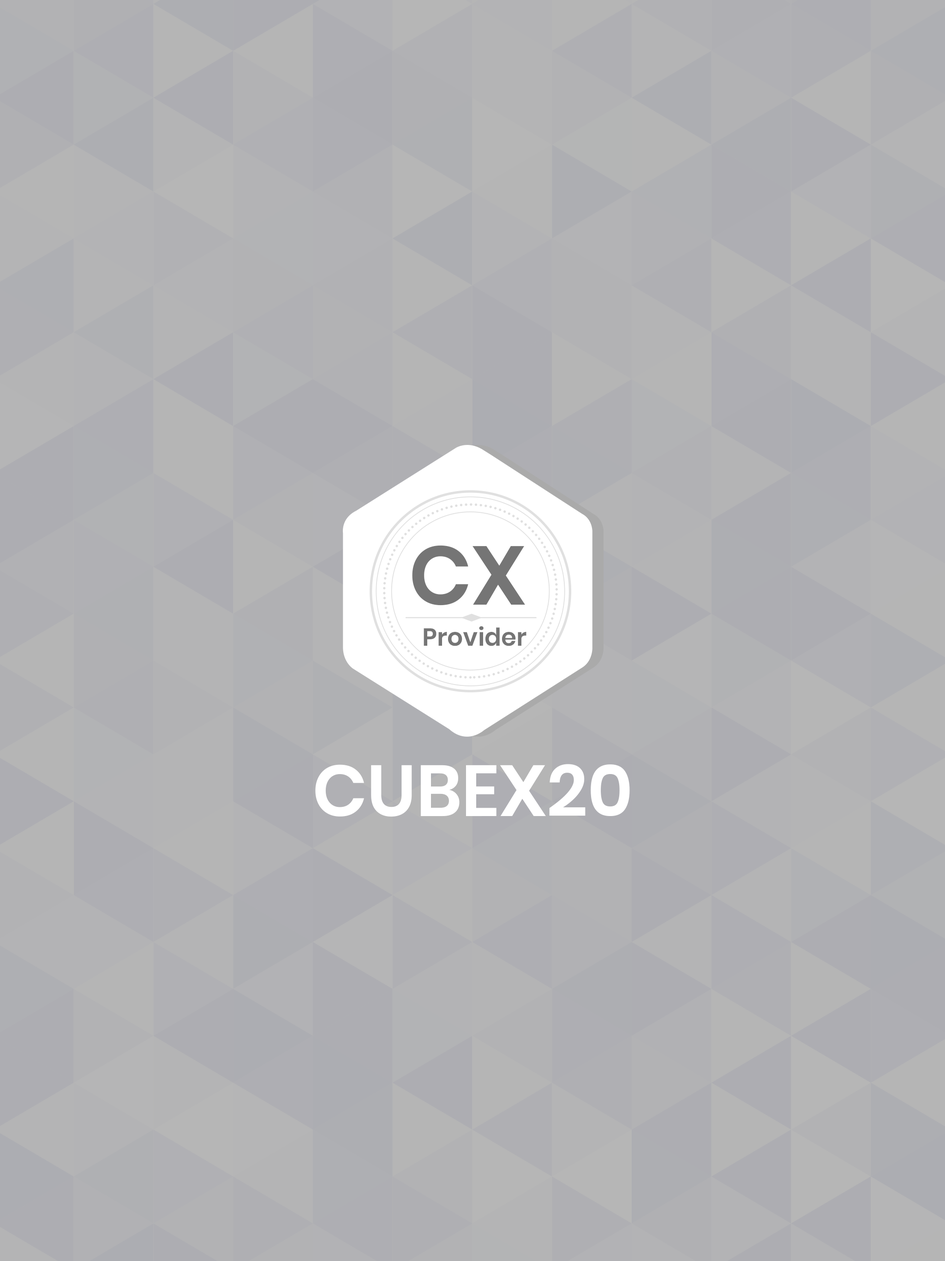
<style>
.page{position:relative;width:945px;height:1261px}
.page>*{position:absolute;margin:0}
.t1{font:83px "Poppins-SemiBold";color:#757575}
.t2{font:24.7px "Poppins-SemiBold";color:#757575}
.t3{font:72px "Poppins-SemiBold";color:#ffffff;text-transform:uppercase}
</style>
<div class="page">
<p class="t1" style="left:412px;top:545px;width:113px;height:61px">CX</p>
<p class="t2" style="left:424px;top:626px;width:103px;height:20px">Provider</p>
<p class="t3" style="left:315px;top:764px;width:315px;height:53px">CubeX20</p>
</div>
